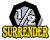
<style>
.page{position:relative;width:50px;height:40px;background:#ffffff}
.page>*{position:absolute;margin:0}
.t1{font:24.7px "Algerian";color:#ffffff}
.t2{font:14.8px "Algerian";color:#fee512;scale:0.55 1}
</style>
<div class="page">
<p class="t1" style="left:16px;top:8px;width:20px;height:18px">½</p>
<p class="t2" style="left:2px;top:26px;width:47px;height:12px">Surrender</p>
</div>
